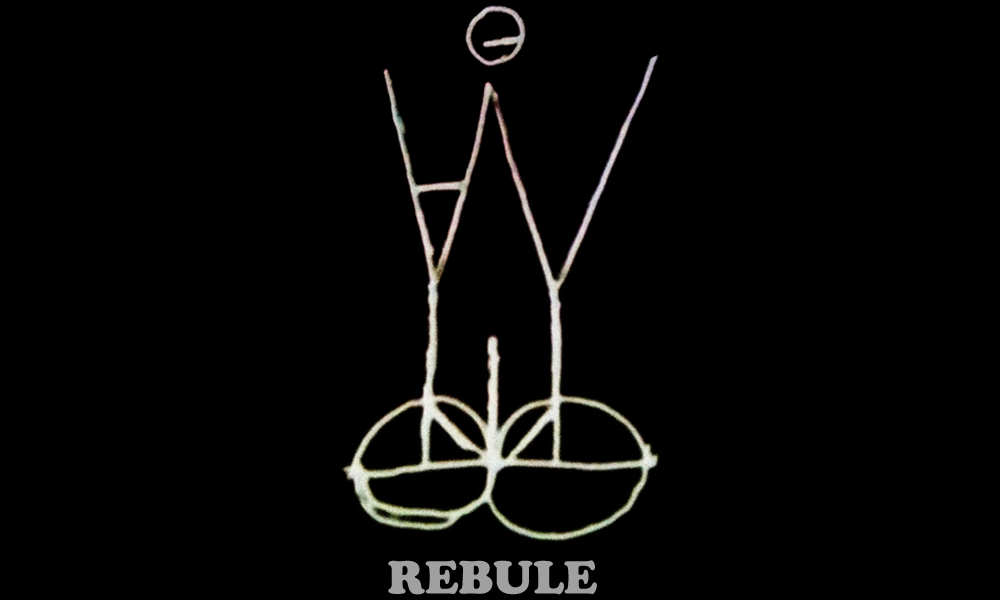
<style>
.page{position:relative;width:1000px;height:600px;background:#000000}
.page>*{position:absolute;margin:0}
.t1{font:46.1px "CooperBlackStd";color:#a0a0a0}
</style>
<div class="page">
<p class="t1" style="left:388px;top:560px;width:209px;height:35px">REBULE</p>
</div>
